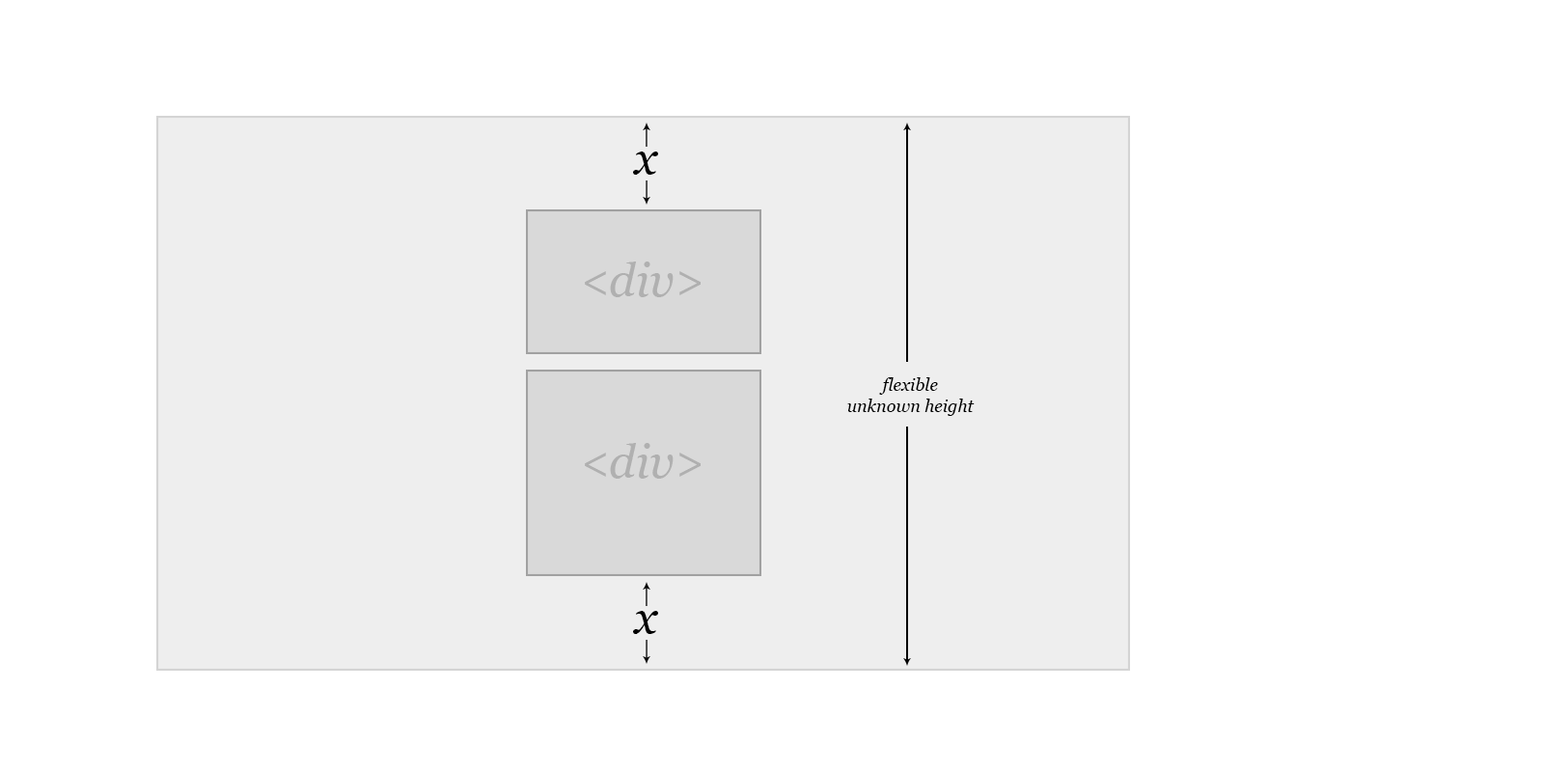
<style>
.page{position:relative;width:1544px;height:772px;background:#ffffff}
.page>*{position:absolute;margin:0}
.t1{font:46.3px "Georgia-Italic";color:#000000}
.t2{font:46.3px "Georgia-Italic";color:#b0b0b0}
.t3{font:17.4px "Georgia-Italic";color:#000000}
</style>
<div class="page">
<p class="t1" style="left:633px;top:152px;width:25px;height:23px">x</p>
<p class="t2" style="left:585px;top:262px;width:116px;height:35px">&lt;div&gt;</p>
<p class="t3" style="left:847px;top:377px;width:128px;height:39px;text-align:center">flexible<br>unknown height</p>
<p class="t2" style="left:585px;top:443px;width:116px;height:36px">&lt;div&gt;</p>
<p class="t1" style="left:633px;top:611px;width:25px;height:23px">x</p>
</div>
